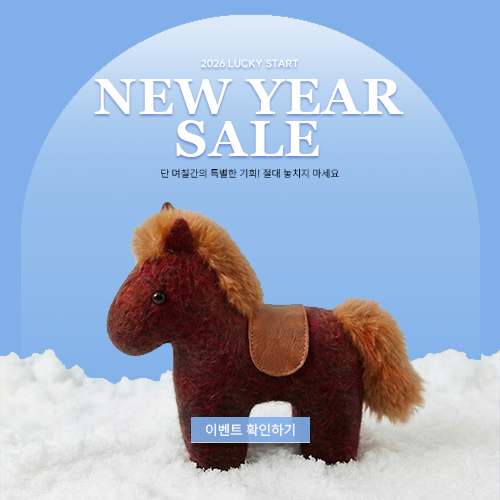
<style>
.page{position:relative;width:500px;height:500px}
.page>*{position:absolute;margin:0}
.t1{font:10px "SUIT-Bold";letter-spacing:0.02em;color:#ffffff;text-transform:uppercase}
.t2{font:50px/42px "Georgia-Bold";letter-spacing:0.02em;color:#ffffff;text-transform:uppercase}
.t3{font:10px "SUIT-Thin";letter-spacing:0.02em;color:#000000;text-transform:uppercase}
.t4{font:14px "SUIT-Regular";letter-spacing:0.02em;color:#ffffff;text-transform:uppercase}
</style>
<div class="page">
<p class="t1" style="left:201px;top:59px;width:98px;height:9px">2026 LUCKY START</p>
<p class="t2" style="left:94px;top:79px;width:310px;height:78px;text-align:center">new year<br>sale</p>
<p class="t3" style="left:161px;top:168px;width:178px;height:10px">단 며칠간의 특별한 기회! 절대 놓치지 마세요</p>
<p class="t4" style="left:206px;top:423px;width:89px;height:14px">이벤트 확인하기</p>
</div>
